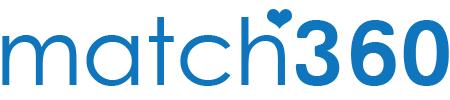
<style>
.page{position:relative;width:450px;height:100px;background:#ffffff}
.page>*{position:absolute;margin:0}
.t1{font:91.7px "LevenimMT";color:#0f75bd}
.t2{font:91.7px "LevenimMT-Bold";color:#0f75bd}
</style>
<div class="page">
<p class="t1" style="left:2px;top:17px;width:447px;height:69px">match<span class="t2">360</span></p>
</div>
